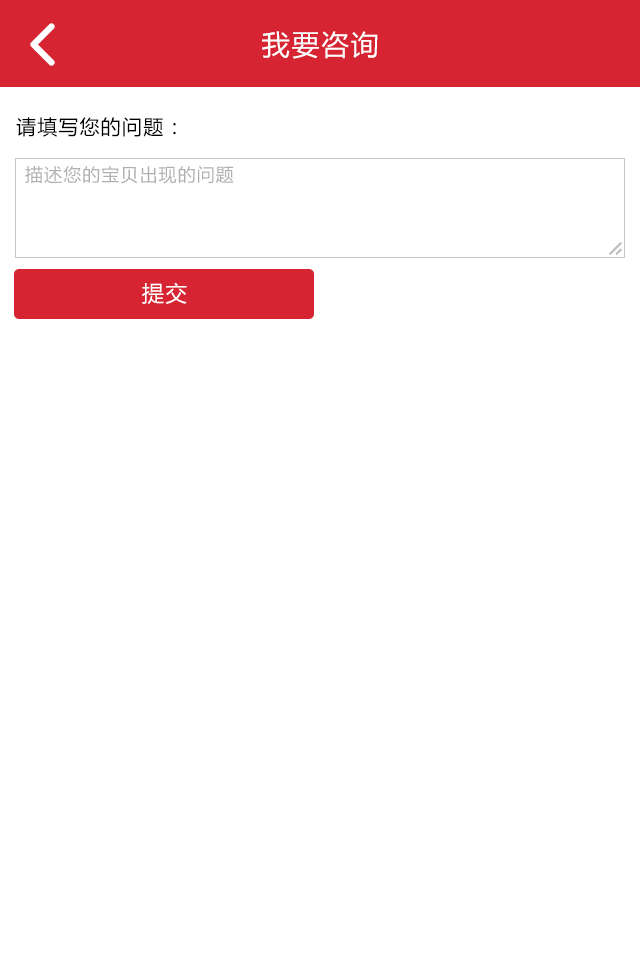
<style>
.page{position:relative;width:640px;height:960px;background:#ffffff}
.page>*{position:absolute;margin:0}
.t1{font:28px "MicrosoftYaHei";letter-spacing:0.06em;color:#ffffff}
.t2{font:20px "MicrosoftYaHei";letter-spacing:0.06em;color:#000000}
.t3{font:18px "MicrosoftYaHei";letter-spacing:0.06em;color:#b0b0b0}
.t4{font:22px "MicrosoftYaHei";letter-spacing:0.06em;color:#ffffff}
</style>
<div class="page">
<p class="t1" style="left:262px;top:31px;width:116px;height:28px">我要咨询</p>
<p class="t2" style="left:16px;top:117px;width:160px;height:20px">请填写您的问题：</p>
<p class="t3" style="left:25px;top:166px;width:209px;height:18px">描述您的宝贝出现的问题</p>
<p class="t4" style="left:142px;top:282px;width:45px;height:22px">提交</p>
</div>
